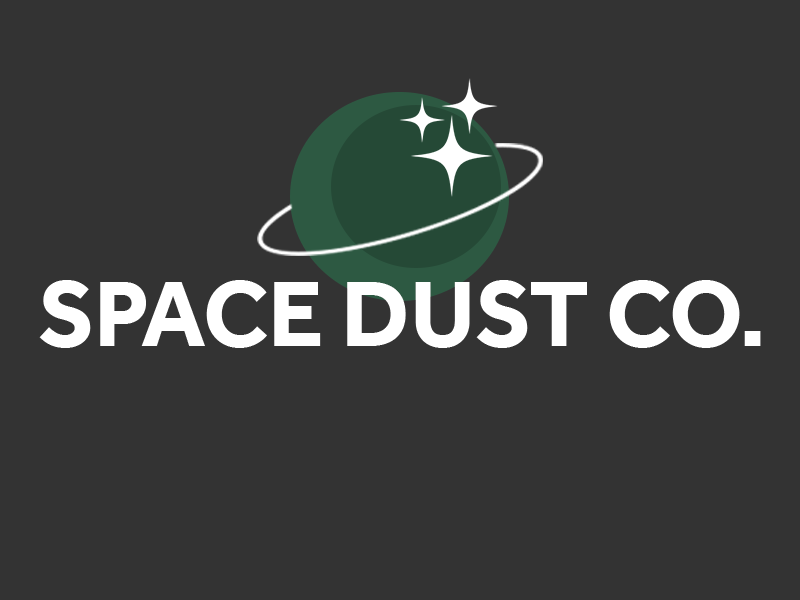
<style>
.page{position:relative;width:800px;height:600px;background:#333333}
.page>*{position:absolute;margin:0}
.t1{font:95.8px "Effra-Bold";color:#ffffff}
</style>
<div class="page">
<p class="t1" style="left:39px;top:280px;width:722px;height:68px">SPACE DUST CO.</p>
</div>
